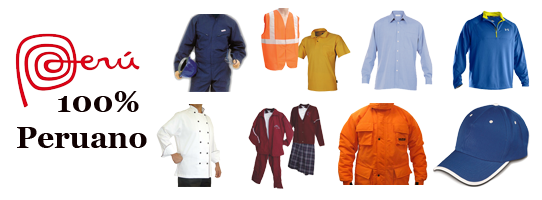
<style>
.page{position:relative;width:542px;height:200px;background:#ffffff}
.page>*{position:absolute;margin:0}
.t1{font:30px "Georgia-Bold";color:#100101}
</style>
<div class="page">
<p class="t1" style="left:17px;top:91px;width:130px;height:57px;text-align:right">100% <br>Peruano</p>
</div>
